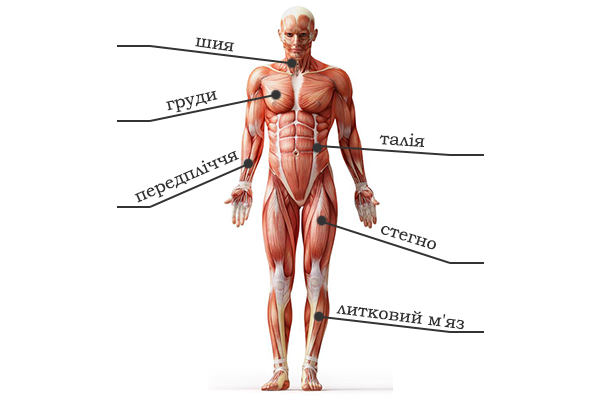
<style>
.page{position:relative;width:600px;height:400px;background:#ffffff}
.page>*{position:absolute;margin:0}
.t1{font:18px "BookmanOldStyle";color:#333333}
</style>
<div class="page">
<p class="t1" style="left:195px;top:37px;width:40px;height:15px;rotate:8deg">шия</p>
<p class="t1" style="left:166px;top:90px;width:52px;height:23px;rotate:-13deg">груди</p>
<p class="t1" style="left:379px;top:133px;width:46px;height:14px;rotate:4deg">талія</p>
<p class="t1" style="left:134px;top:150px;width:105px;height:53px;rotate:-23deg">передпліччя</p>
<p class="t1" style="left:381px;top:226px;width:55px;height:24px;rotate:17deg">стегно</p>
<p class="t1" style="left:336px;top:305px;width:128px;height:25px;rotate:7deg">литковий м'яз</p>
</div>
